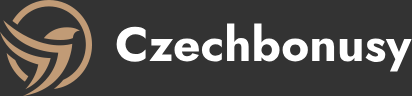
<style>
.page{position:relative;width:412px;height:96px;background:#333333}
.page>*{position:absolute;margin:0}
.t1{font:48px "Jost-Bold";color:#ffffff}
</style>
<div class="page">
<p class="t1" style="left:116px;top:23px;width:296px;height:49px">Czechbonusy</p>
</div>
